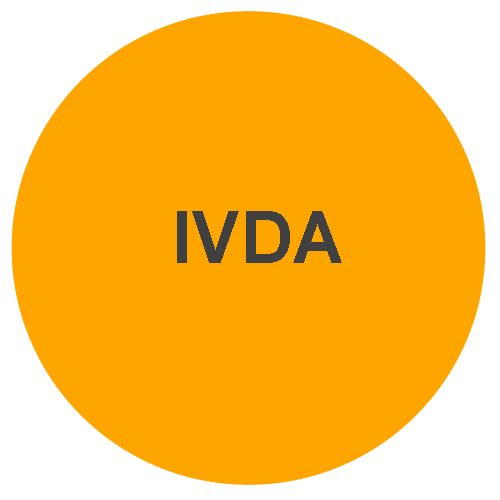
<style>
.page{position:relative;width:500px;height:500px;background:#fea500}
.page>*{position:absolute;margin:0}
.t1{font:72px "Arial-BoldMT";color:#404040}
</style>
<div class="page">
<p class="t1" style="left:177px;top:211px;width:165px;height:52px">IVDA</p>
</div>
